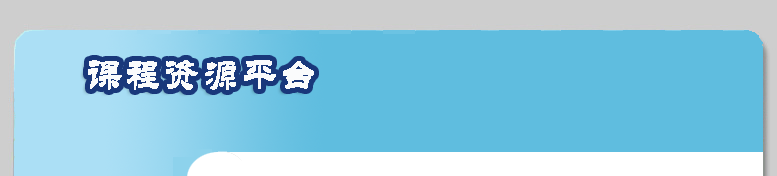
<style>
.page{position:relative;width:777px;height:176px;background:#5fbddf}
.page>*{position:absolute;margin:0}
.t1{font:41.8px "STLiti";letter-spacing:0.05em;color:#fafbfc;font-weight:bold;scale:0.86 1}
</style>
<div class="page">
<p class="t1" style="left:88px;top:60px;width:226px;height:30px">课程资源平台</p>
</div>
